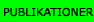
<style>
.page{position:relative;width:94px;height:22px;background:#00ff00}
.page>*{position:absolute;margin:0}
.t1{font:11px "Verdana";color:#000000}
</style>
<div class="page">
<p class="t1" style="left:4px;top:7px;width:90px;height:10px">PUBLIKATIONER</p>
</div>
